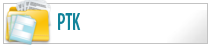
<style>
.page{position:relative;width:211px;height:47px;background:#ffffff}
.page>*{position:absolute;margin:0}
.t1{font:24px "MyriadPro-SemiboldCond";color:#11839a;scale:0.78 1}
</style>
<div class="page">
<p class="t1" style="left:58px;top:13px;width:23px;height:17px">PTK</p>
</div>
